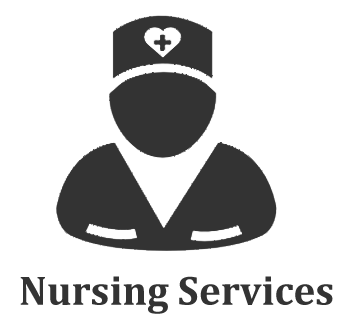
<style>
.page{position:relative;width:342px;height:320px;background:#ffffff}
.page>*{position:absolute;margin:0}
.t1{font:41.8px "Cambria-Bold";color:#333333}
</style>
<div class="page">
<p class="t1" style="left:20px;top:276px;width:313px;height:38px">Nursing Services</p>
</div>
